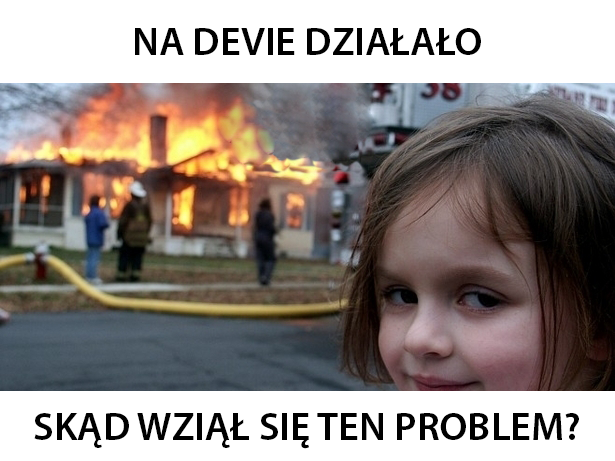
<style>
.page{position:relative;width:615px;height:461px;background:#ffffff}
.page>*{position:absolute;margin:0}
.t1{font:40px "MyriadPro-Semibold";color:#000000}
</style>
<div class="page">
<p class="t1" style="left:135px;top:28px;width:346px;height:27px">NA DEVIE DZIAŁAŁO</p>
<p class="t1" style="left:34px;top:413px;width:545px;height:36px">SKĄD WZIĄŁ SIĘ TEN PROBLEM?</p>
</div>
